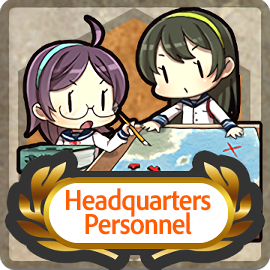
<style>
.page{position:relative;width:270px;height:270px}
.page>*{position:absolute;margin:0}
.t1{font:30px/24px "AdobeClean-Bold";letter-spacing:-0.04em;color:#ff5d00;scale:0.9 1}
</style>
<div class="page">
<p class="t1" style="left:66px;top:188px;width:145px;height:47px;text-align:center">Headquarters<br>Personnel</p>
</div>
